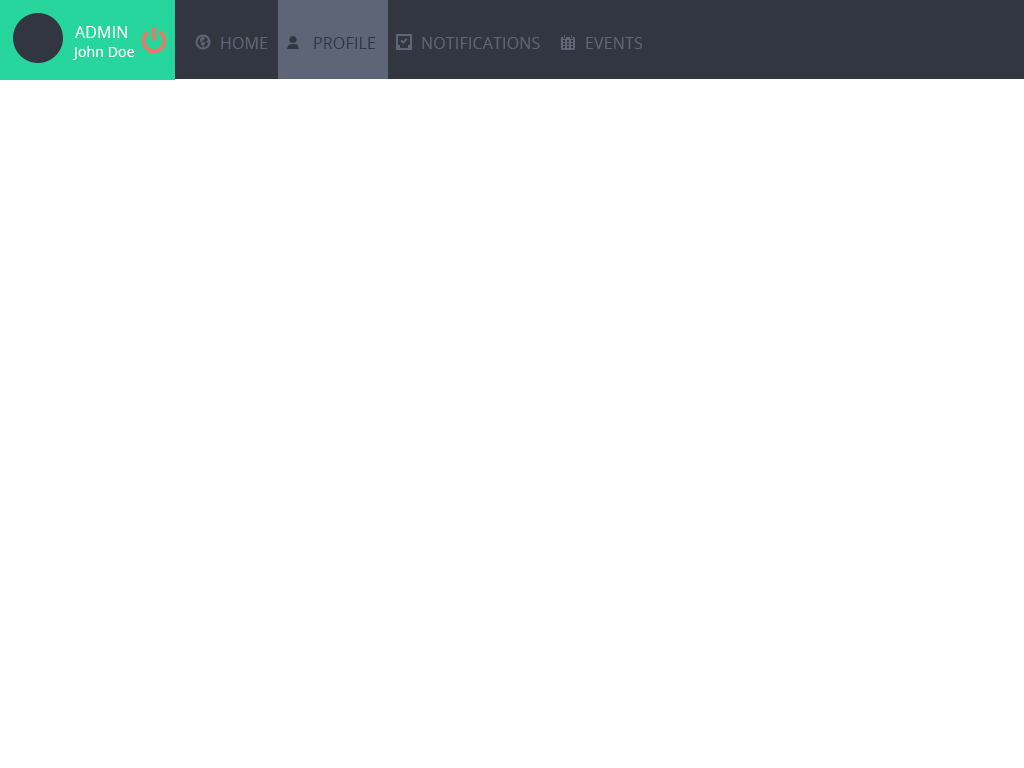
<style>
.page{position:relative;width:1024px;height:768px;background:#ffffff}
.page>*{position:absolute;margin:0}
.t1{font:16px "OpenSans";letter-spacing:0.01em;color:#ffffff}
.t2{font:16px "OpenSans";letter-spacing:0.01em;color:#5e6577}
.t3{font:16px "OpenSans";letter-spacing:0.01em;color:#313640}
.t4{font:14px "OpenSans";letter-spacing:0.01em;color:#ffffff}
</style>
<div class="page">
<p class="t1" style="left:75px;top:26px;width:52px;height:12px">ADMIN</p>
<p class="t2" style="left:221px;top:37px;width:47px;height:12px">HOME</p>
<p class="t3" style="left:314px;top:37px;width:62px;height:12px">PROFILE</p>
<p class="t2" style="left:422px;top:37px;width:118px;height:12px">NOTIFICATIONS</p>
<p class="t2" style="left:586px;top:37px;width:57px;height:12px">EVENTS</p>
<p class="t4" style="left:72px;top:46px;width:62px;height:14px">John Doe</p>
</div>
